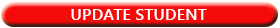
<style>
.page{position:relative;width:280px;height:28px;background:#f60b0b}
.page>*{position:absolute;margin:0}
.t1{font:16.4px "YuGothicUI-Bold";color:#ffffff}
</style>
<div class="page">
<p class="t1" style="left:71px;top:9px;width:136px;height:11px">UPDATE STUDENT</p>
</div>
